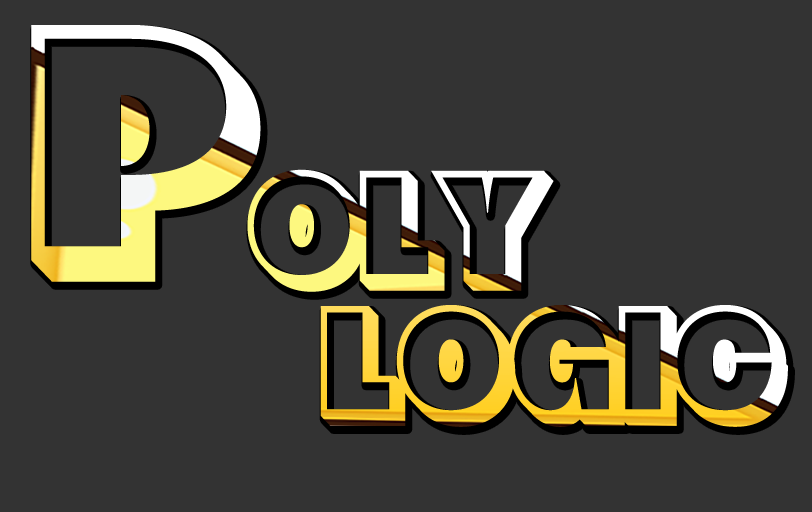
<style>
.page{position:relative;width:812px;height:512px;background:#333333}
.page>*{position:absolute;margin:0}
.t1{font:305.3px "Fulcher-ExtrudeRight";letter-spacing:0.05em;text-transform:uppercase;scale:0.96 1}
.t2{font:142.3px "Fulcher-ExtrudeRight";letter-spacing:0.05em;text-transform:uppercase;scale:0.96 1}
</style>
<div class="page">
<p class="t1" style="left:31px;top:25px;width:230px;height:257px">P</p>
<p class="t2" style="left:247px;top:169px;width:307px;height:123px">oly</p>
<p class="t2" style="left:320px;top:305px;width:468px;height:122px">Logic</p>
</div>
